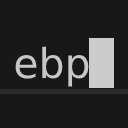
<style>
.page{position:relative;width:128px;height:128px;background:#181818}
.page>*{position:absolute;margin:0}
.t1{font:41px "DejaVuSans";color:#c7c7c7}
</style>
<div class="page">
<p class="t1" style="left:15px;top:46px;width:74px;height:41px">ebp</p>
</div>
